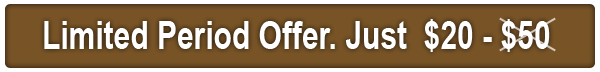
<style>
.page{position:relative;width:600px;height:72px;background:#775326}
.page>*{position:absolute;margin:0}
.t1{font:39px "Arial-BoldMT";color:#ffffff;scale:0.77 1}
</style>
<div class="page">
<p class="t1" style="left:44px;top:19px;width:506px;height:33px">Limited Period Offer. Just  $20 - $50</p>
</div>
